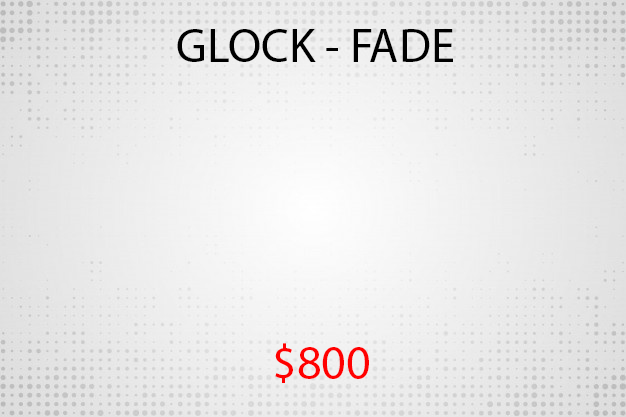
<style>
.page{position:relative;width:626px;height:417px}
.page>*{position:absolute;margin:0}
.t1{font:48px "MyriadPro-Regular";color:#000000}
.t2{font:48px "MyriadPro-Regular";color:#ff0000}
</style>
<div class="page">
<p class="t1" style="left:177px;top:29px;width:276px;height:33px">GLOCK - FADE</p>
<p class="t2" style="left:275px;top:343px;width:94px;height:40px">$800</p>
</div>
